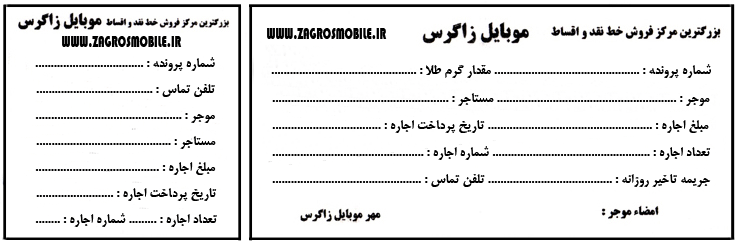
<style>
.page{position:relative;width:739px;height:244px;background:#ffffff}
.page>*{position:absolute;margin:0}
.t1{font:16.7px "Bauhaus93";color:#000000;scale:0.66 1}
.t2{font:13.9px "BMitraBold";color:#000000}
</style>
<div class="page">
<p class="t1" style="left:267px;top:28px;width:120px;height:11px">WWW.ZAGROSMOBILE.IR</p>
<p class="t1" style="left:62px;top:36px;width:120px;height:11px">WWW.ZAGROSMOBILE.IR</p>
<p class="t2" style="left:35px;top:57px;width:180px;height:14px">شماره پرونده : ...................................</p>
<p class="t2" style="left:271px;top:64px;width:440px;height:14px">شماره پرونده : ............................................... مقدار گرم طلا : ...............................................</p>
<p class="t2" style="left:36px;top:84px;width:179px;height:13px">تلفن تماس : ......................................</p>
<p class="t2" style="left:272px;top:93px;width:438px;height:13px">موجر : .......................................................... مستاجر : .........................................................</p>
<p class="t2" style="left:35px;top:113px;width:180px;height:10px">موجر : ...............................................</p>
<p class="t2" style="left:272px;top:120px;width:437px;height:13px">مبلغ اجاره : ..................................................... تاریخ پرداخت اجاره : ...................................</p>
<p class="t2" style="left:36px;top:136px;width:180px;height:13px">مستاجر : ............................................</p>
<p class="t2" style="left:272px;top:146px;width:439px;height:14px">تعداد اجاره : ................................................... شماره اجاره : .................................................</p>
<p class="t2" style="left:35px;top:162px;width:181px;height:13px">مبلغ اجاره : ........................................</p>
<p class="t2" style="left:272px;top:174px;width:439px;height:13px">جریمه تاخیر روزانه : ........................................ تلفن تماس : ................................................</p>
<p class="t2" style="left:36px;top:188px;width:181px;height:13px">تاریخ پرداخت اجاره : .........................</p>
<p class="t2" style="left:35px;top:213px;width:182px;height:14px">تعداد اجاره : ......... شماره اجاره : ........</p>
</div>
